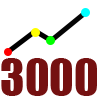
<style>
.page{position:relative;width:100px;height:100px;background:#ffffff}
.page>*{position:absolute;margin:0}
.t1{font:45.7px "Impact";color:#751111}
</style>
<div class="page">
<p class="t1" style="left:1px;top:58px;width:96px;height:38px">3000</p>
</div>
